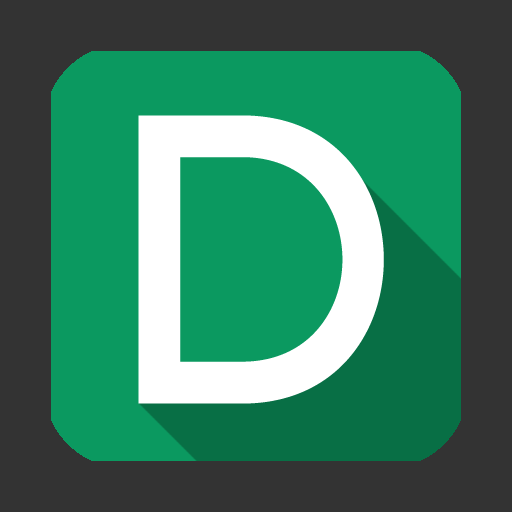
<style>
.page{position:relative;width:512px;height:512px;background:#0b9960}
.page>*{position:absolute;margin:0}
.t1{font:411.1px "Code-Bold";color:#ffffff}
</style>
<div class="page">
<p class="t1" style="left:138px;top:115px;width:246px;height:289px">D</p>
</div>
